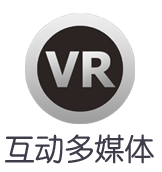
<style>
.page{position:relative;width:162px;height:172px;background:#ffffff}
.page>*{position:absolute;margin:0}
.t1{font:30px "STYuanti-TC-Regular";color:#3f3b48}
</style>
<div class="page">
<p class="t1" style="left:5px;top:134px;width:149px;height:30px">互动多媒体</p>
</div>
